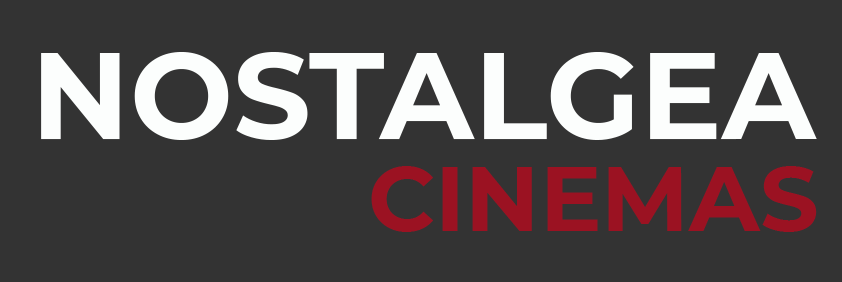
<style>
.page{position:relative;width:842px;height:282px;background:#333333}
.page>*{position:absolute;margin:0}
.t1{font:122px "Montserrat-Bold";color:#fcfefd}
.t2{font:92px "Montserrat-Bold";color:#9b1222}
</style>
<div class="page">
<p class="t1" style="left:41px;top:52px;width:776px;height:88px">NOSTALGEA</p>
<p class="t2" style="left:371px;top:166px;width:446px;height:66px">CINEMAS</p>
</div>
